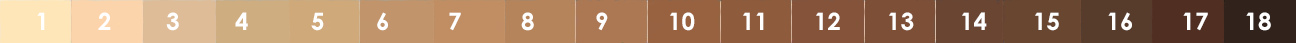
<style>
.page{position:relative;width:1296px;height:43px}
.page>*{position:absolute;margin:0}
.t1{font:24px "CenturyGothic-Bold";color:#ffffff}
.t2{font:24px "CenturyGothic-Bold";color:#fefefe}
</style>
<div class="page">
<p class="t1" style="left:37px;top:12px;width:8px;height:18px">1</p>
<p class="t1" style="left:98px;top:12px;width:13px;height:18px">2</p>
<p class="t1" style="left:166px;top:12px;width:13px;height:19px">3</p>
<p class="t1" style="left:235px;top:12px;width:13px;height:18px">4</p>
<p class="t2" style="left:311px;top:12px;width:13px;height:19px">5</p>
<p class="t1" style="left:377px;top:12px;width:11px;height:19px">6</p>
<p class="t1" style="left:449px;top:12px;width:12px;height:19px">7</p>
<p class="t2" style="left:521px;top:12px;width:13px;height:19px">8</p>
<p class="t1" style="left:596px;top:12px;width:12px;height:19px">9</p>
<p class="t1" style="left:670px;top:12px;width:25px;height:19px">10</p>
<p class="t1" style="left:743px;top:12px;width:21px;height:18px">11</p>
<p class="t1" style="left:816px;top:12px;width:24px;height:18px">12</p>
<p class="t1" style="left:889px;top:12px;width:25px;height:19px">13</p>
<p class="t1" style="left:962px;top:12px;width:25px;height:18px">14</p>
<p class="t1" style="left:1035px;top:12px;width:24px;height:19px">15</p>
<p class="t1" style="left:1108px;top:12px;width:24px;height:19px">16</p>
<p class="t1" style="left:1183px;top:12px;width:25px;height:19px">17</p>
<p class="t1" style="left:1246px;top:12px;width:25px;height:19px">18</p>
</div>
